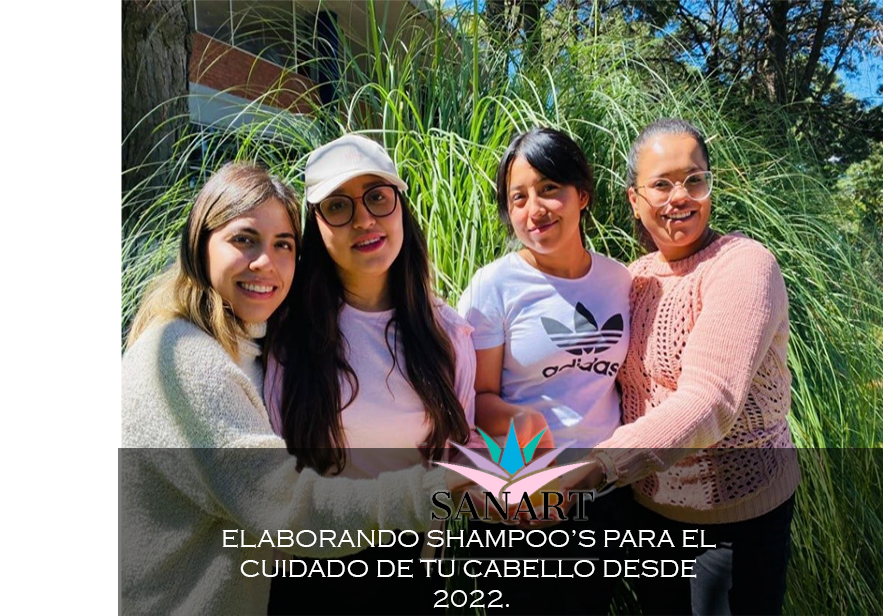
<style>
.page{position:relative;width:883px;height:616px}
.page>*{position:absolute;margin:0}
.t1{font:25px "CopperplateGothic-Light";color:#ffffff}
</style>
<div class="page">
<p class="t1" style="left:222px;top:529px;width:494px;height:79px;text-align:center">ELABORANDO SHAMPOO’S PARA EL <br>CUIDADO DE TU CABELLO DESDE <br>2022.</p>
</div>
